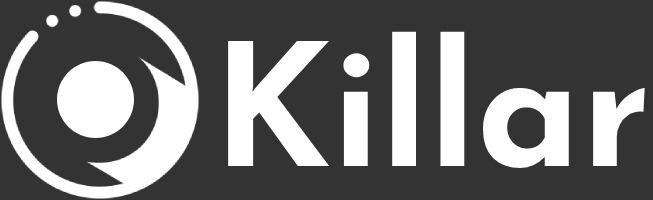
<style>
.page{position:relative;width:653px;height:200px;background:#333333}
.page>*{position:absolute;margin:0}
.t1{font:170px "JosefinSans-Bold";color:#ffffff}
</style>
<div class="page">
<p class="t1" style="left:228px;top:31px;width:417px;height:138px">Killar</p>
</div>
